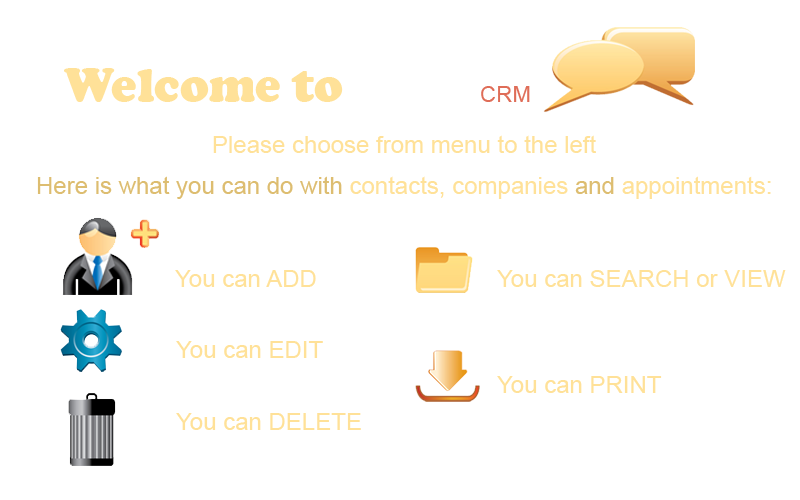
<style>
.page{position:relative;width:800px;height:500px;background:#ffffff}
.page>*{position:absolute;margin:0}
.t1{font:48px "CooperBlack";color:#ffe198}
.t2{font:22.5px "ArialMT";color:#df6d58}
.t3{font:24px "ArialMT";color:#ffe198}
.t4{font:24px "ArialMT";color:#ddbd70}
</style>
<div class="page">
<p class="t1" style="left:64px;top:68px;width:279px;height:34px">Welcome to</p>
<p class="t2" style="left:481px;top:86px;width:49px;height:16px">CRM</p>
<p class="t3" style="left:213px;top:135px;width:383px;height:18px">Please choose from menu to the left</p>
<p class="t4" style="left:37px;top:176px;width:734px;height:23px"><span class="t3"><br></span>Here is what you can do with<span class="t3"> contacts, companies </span>and <span class="t3">appointments:</span></p>
<p class="t3" style="left:175px;top:270px;width:141px;height:17px">You can ADD</p>
<p class="t3" style="left:497px;top:270px;width:289px;height:17px">You can SEARCH or VIEW</p>
<p class="t3" style="left:176px;top:341px;width:147px;height:17px">You can EDIT</p>
<p class="t3" style="left:497px;top:376px;width:165px;height:17px">You can PRINT</p>
<p class="t3" style="left:176px;top:413px;width:185px;height:17px">You can DELETE</p>
</div>
